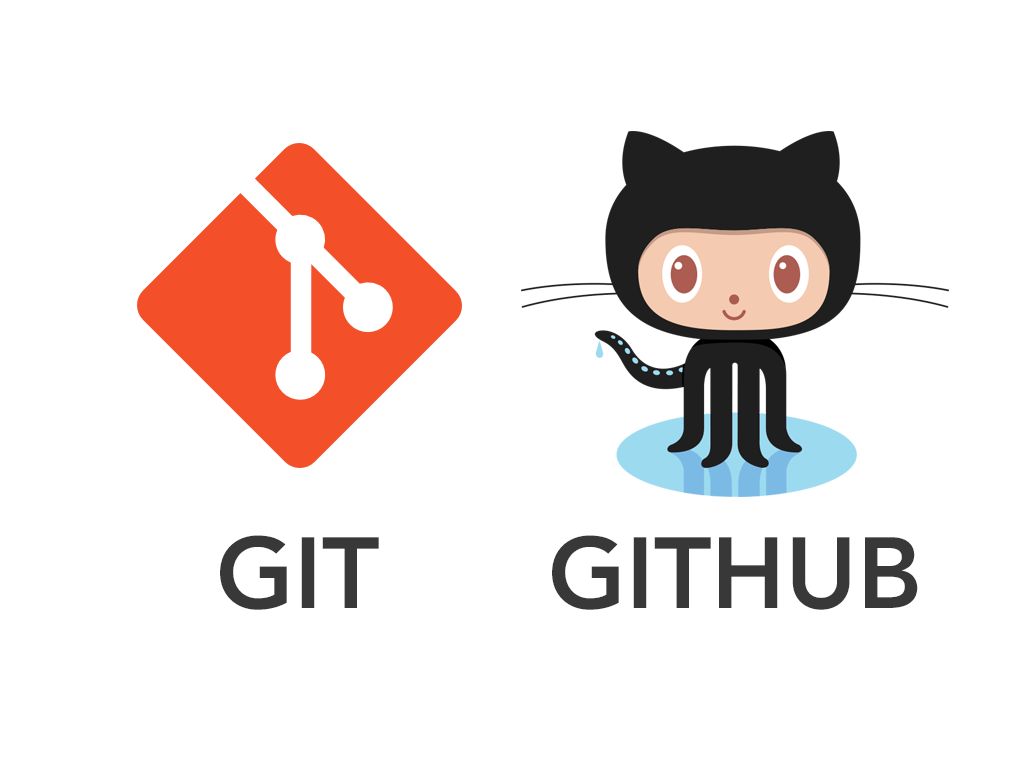
<style>
.page{position:relative;width:1024px;height:768px;background:#ffffff}
.page>*{position:absolute;margin:0}
.t1{font:100px "AvenirLTStd-Heavy";color:#383838;text-transform:uppercase}
</style>
<div class="page">
<p class="t1" style="left:220px;top:535px;width:159px;height:75px">Git</p>
<p class="t1" style="left:552px;top:535px;width:366px;height:75px">Github</p>
</div>
